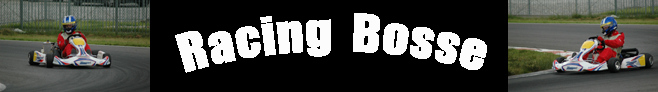
<style>
.page{position:relative;width:658px;height:92px;background:#000000}
.page>*{position:absolute;margin:0}
.t1{font:48px "Impact";color:#fdfcfc}
</style>
<div class="page">
<p class="t1" style="left:175px;top:13px;width:312px;height:60px">Racing  Bosse</p>
</div>
